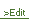
<style>
.page{position:relative;width:29px;height:19px;background:#ffffff}
.page>*{position:absolute;margin:0}
.t1{font:9px "Tahoma";color:#4a752f}
</style>
<div class="page">
<p class="t1" style="left:4px;top:8px;width:21px;height:8px">&gt;Edit</p>
</div>
